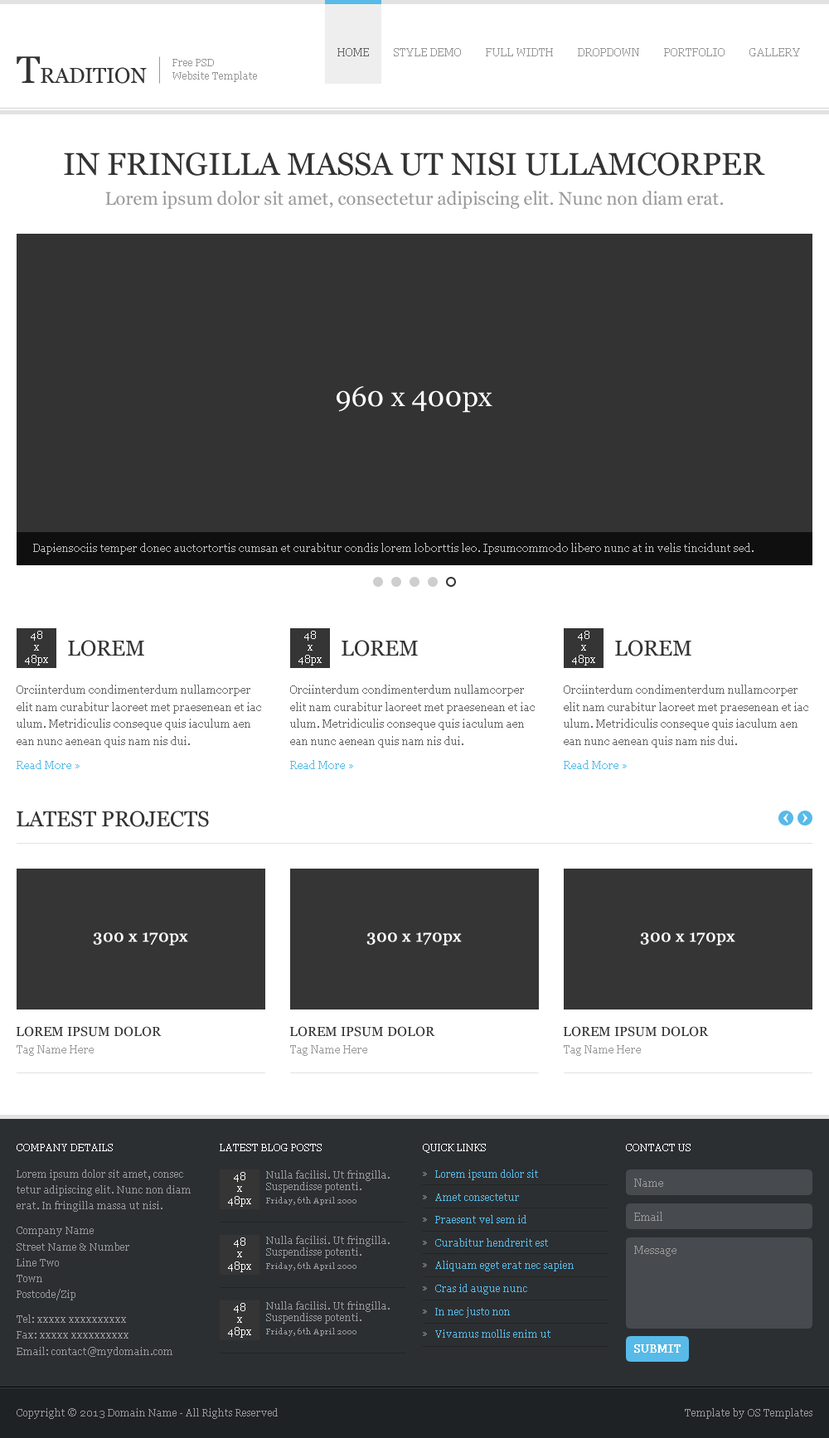
<style>
.page{position:relative;width:829px;height:1438px;background:#ffffff}
.page>*{position:absolute;margin:0}
.t1{font:10.8px "Georgia";color:#666666}
.t2{font:10.8px "Georgia";color:#979797}
.t3{font:21.6px "Georgia";color:#333333}
.t4{font:38.1px "Georgia";color:#333333}
.t5{font:9.9px/12.9px "Georgia";color:#999999}
.t6{font:31.5px "Georgia";color:#333333}
.t7{font:18.2px "Georgia";color:#999999}
.t8{font:28.2px "Georgia";color:#ffffff}
.t9{font:10.8px "Georgia";color:#bfbfbf}
.t10{font:9.9px/11.9px "Georgia";color:#ffffff}
.t11{font:10.8px/17.2px "Georgia";color:#666666}
.t12{font:10.8px "Georgia";color:#57bae8}
.t13{font:16.6px "Georgia";color:#ffffff;font-weight:bold}
.t14{font:13.3px "Georgia";color:#333333}
.t15{font:10.8px "Georgia";color:#999999}
.t16{font:9.9px "Georgia";color:#ffffff}
.t17{font:9.9px/15.9px "Georgia";color:#999999}
.t18{font:9.9px/24.9px "Georgia";color:#999999}
.t19{font:9.9px/22.9px "Georgia";color:#57bae8}
.t20{font:9.9px/11.9px "Georgia";color:#999999}
.t21{font:9.9px/22.9px "Georgia";color:#999999}
.t22{font:8.3px "Georgia";color:#999999}
.t23{font:10.8px "Georgia";color:#ffffff;font-weight:bold}
.t24{font:9.9px "Georgia";color:#999999}
</style>
<div class="page">
<p class="t1" style="left:337px;top:48px;width:32px;height:8px">HOME</p>
<p class="t2" style="left:394px;top:48px;width:67px;height:8px">STYLE DEMO</p>
<p class="t2" style="left:486px;top:48px;width:67px;height:8px">FULL WIDTH</p>
<p class="t2" style="left:578px;top:48px;width:61px;height:8px">DROPDOWN</p>
<p class="t2" style="left:664px;top:48px;width:61px;height:8px">PORTFOLIO</p>
<p class="t2" style="left:749px;top:48px;width:51px;height:8px">GALLERY</p>
<p class="t3" style="left:17px;top:56px;width:130px;height:28px"><span class="t4">T</span>RADITION</p>
<p class="t5" style="left:172px;top:59px;width:85px;height:23px">Free PSD<br>Website Template</p>
<p class="t6" style="left:64px;top:153px;width:701px;height:23px">IN FRINGILLA MASSA UT NISI ULLAMCORPER</p>
<p class="t7" style="left:105px;top:191px;width:618px;height:18px">Lorem ipsum dolor sit amet, consectetur adipiscing elit. Nunc non diam erat.</p>
<p class="t8" style="left:337px;top:386px;width:155px;height:27px">960 x 400px</p>
<p class="t9" style="left:33px;top:543px;width:721px;height:12px">Dapiensociis temper donec auctortortis cumsan et curabitur condis lorem loborttis leo. Ipsumcommodo libero nunc at in velis tincidunt sed.</p>
<p class="t10" style="left:25px;top:631px;width:23px;height:35px;text-align:center">48<br>x<br>48px</p>
<p class="t3" style="left:68px;top:640px;width:76px;height:17px">LOREM</p>
<p class="t10" style="left:298px;top:631px;width:24px;height:35px;text-align:center">48<br>x<br>48px</p>
<p class="t3" style="left:342px;top:640px;width:76px;height:17px">LOREM</p>
<p class="t10" style="left:572px;top:631px;width:23px;height:35px;text-align:center">48<br>x<br>48px</p>
<p class="t3" style="left:615px;top:640px;width:76px;height:17px">LOREM</p>
<p class="t11" style="left:17px;top:685px;width:244px;height:63px">Orciinterdum condimenterdum nullamcorper <br>elit nam curabitur laoreet met praesenean et iac<br>ulum. Metridiculis conseque quis iaculum aen<br>ean nunc aenean quis nam nis dui.</p>
<p class="t11" style="left:290px;top:685px;width:245px;height:63px">Orciinterdum condimenterdum nullamcorper <br>elit nam curabitur laoreet met praesenean et iac<br>ulum. Metridiculis conseque quis iaculum aen<br>ean nunc aenean quis nam nis dui.</p>
<p class="t11" style="left:564px;top:685px;width:244px;height:63px">Orciinterdum condimenterdum nullamcorper <br>elit nam curabitur laoreet met praesenean et iac<br>ulum. Metridiculis conseque quis iaculum aen<br>ean nunc aenean quis nam nis dui.</p>
<p class="t12" style="left:17px;top:760px;width:63px;height:9px">Read More »</p>
<p class="t12" style="left:290px;top:760px;width:63px;height:9px">Read More »</p>
<p class="t12" style="left:564px;top:760px;width:63px;height:9px">Read More »</p>
<p class="t3" style="left:17px;top:811px;width:192px;height:16px">LATEST PROJECTS</p>
<p class="t13" style="left:93px;top:933px;width:95px;height:13px">300 x 170px</p>
<p class="t13" style="left:366px;top:933px;width:96px;height:13px">300 x 170px</p>
<p class="t13" style="left:640px;top:933px;width:95px;height:13px">300 x 170px</p>
<p class="t14" style="left:16px;top:1026px;width:146px;height:11px">LOREM IPSUM DOLOR</p>
<p class="t14" style="left:289px;top:1026px;width:146px;height:11px">LOREM IPSUM DOLOR</p>
<p class="t14" style="left:563px;top:1026px;width:146px;height:11px">LOREM IPSUM DOLOR</p>
<p class="t15" style="left:17px;top:1045px;width:77px;height:11px">Tag Name Here</p>
<p class="t15" style="left:290px;top:1045px;width:77px;height:11px">Tag Name Here</p>
<p class="t15" style="left:564px;top:1045px;width:77px;height:11px">Tag Name Here</p>
<p class="t16" style="left:17px;top:1144px;width:96px;height:8px">COMPANY DETAILS</p>
<p class="t16" style="left:220px;top:1144px;width:102px;height:8px">LATEST BLOG POSTS</p>
<p class="t16" style="left:423px;top:1144px;width:63px;height:9px">QUICK LINKS</p>
<p class="t16" style="left:626px;top:1144px;width:65px;height:8px">CONTACT US</p>
<p class="t17" style="left:17px;top:1170px;width:174px;height:188px">Lorem ipsum dolor sit amet, consec tetur adipiscing elit. Nunc non diam erat. In fringilla massa ut nisi.<br><span class="t18">Company Name<br></span>Street Name &amp; Number<br>Line Two<br>Town<br>Postcode/Zip<br><span class="t18">Tel: xxxxx xxxxxxxxxx<br></span>Fax: xxxxx xxxxxxxxxx<br>Email: contact@mydomain.com</p>
<p class="t19" style="left:435px;top:1170px;width:139px;height:168px">Lorem ipsum dolor sit<br>Amet consectetur<br>Praesent vel sem id<br>Curabitur hendrerit est<br>Aliquam eget erat nec sapien<br>Cras id augue nunc<br>In nec justo non<br>Vivamus mollis enim ut</p>
<p class="t10" style="left:228px;top:1172px;width:23px;height:35px;text-align:center">48<br>x<br>48px</p>
<p class="t20" style="left:266px;top:1171px;width:124px;height:22px">Nulla facilisi. Ut fringilla. Suspendisse potenti.</p>
<p class="t21" style="left:423px;top:1172px;width:4px;height:164px">»<br>»<br>»<br>»<br>»<br>»<br>»<br>»</p>
<p class="t15" style="left:634px;top:1179px;width:29px;height:8px">Name</p>
<p class="t22" style="left:266px;top:1197px;width:90px;height:8px">Friday, 6th April 2000</p>
<p class="t15" style="left:634px;top:1212px;width:28px;height:9px">Email</p>
<p class="t10" style="left:228px;top:1238px;width:23px;height:35px;text-align:center">48<br>x<br>48px</p>
<p class="t20" style="left:266px;top:1236px;width:124px;height:22px">Nulla facilisi. Ut fringilla. Suspendisse potenti.</p>
<p class="t15" style="left:634px;top:1246px;width:42px;height:11px">Message</p>
<p class="t22" style="left:266px;top:1263px;width:90px;height:8px">Friday, 6th April 2000</p>
<p class="t20" style="left:266px;top:1302px;width:124px;height:22px">Nulla facilisi. Ut fringilla. Suspendisse potenti.</p>
<p class="t10" style="left:228px;top:1303px;width:23px;height:35px;text-align:center">48<br>x<br>48px</p>
<p class="t22" style="left:266px;top:1328px;width:90px;height:8px">Friday, 6th April 2000</p>
<p class="t23" style="left:634px;top:1345px;width:47px;height:8px">SUBMIT</p>
<p class="t24" style="left:17px;top:1409px;width:261px;height:10px">Copyright © 2013 Domain Name - All Rights Reserved</p>
<p class="t24" style="left:685px;top:1409px;width:127px;height:10px">Template by OS Templates</p>
</div>
